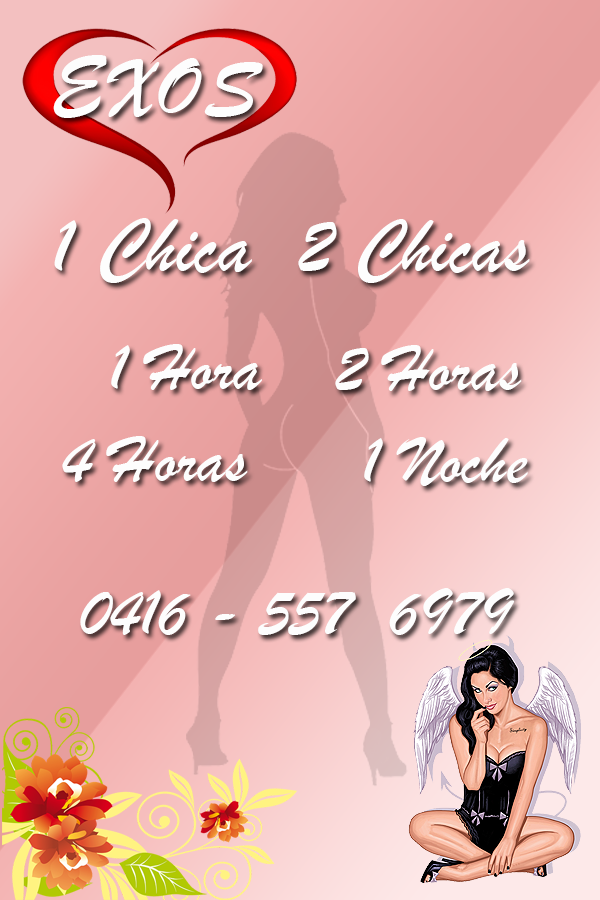
<style>
.page{position:relative;width:600px;height:900px}
.page>*{position:absolute;margin:0}
.t1{font:85px "BrushScriptMT";color:#ffffff}
.t2{font:81.5px "BrushScriptMT";color:#ffffff}
.t3{font:78.9px "BrushScriptMT";color:#ffffff}
.t4{font:69px "BrushScriptMT";color:#ffffff}
</style>
<div class="page">
<p class="t1" style="left:53px;top:55px;width:210px;height:63px">EXOS</p>
<p class="t2" style="left:54px;top:218px;width:198px;height:65px">1 Chica</p>
<p class="t3" style="left:298px;top:219px;width:232px;height:64px">2 Chicas</p>
<p class="t4" style="left:111px;top:344px;width:151px;height:46px">1 Hora</p>
<p class="t4" style="left:335px;top:345px;width:187px;height:46px">2 Horas</p>
<p class="t4" style="left:62px;top:436px;width:186px;height:46px">4 Horas</p>
<p class="t4" style="left:364px;top:437px;width:164px;height:49px">1 Noche</p>
<p class="t4" style="left:80px;top:588px;width:435px;height:47px">0416 - 557  6979</p>
</div>
